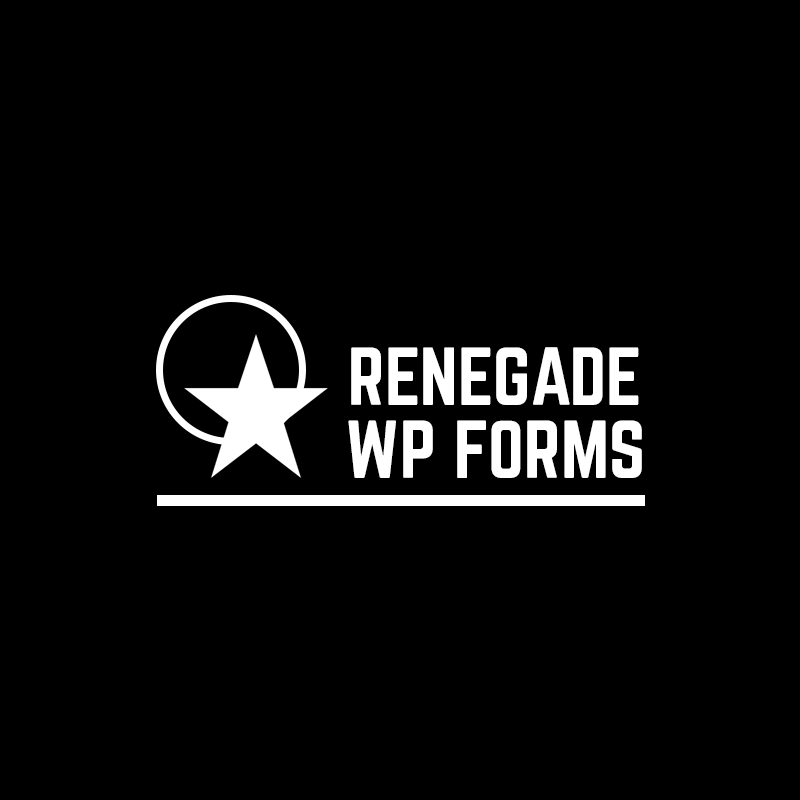
<style>
.page{position:relative;width:800px;height:800px;background:#000000}
.page>*{position:absolute;margin:0}
.t1{font:72px "Norwester-Regular";color:#ffffff}
</style>
<div class="page">
<p class="t1" style="left:351px;top:347px;width:288px;height:58px">RENEGADE</p>
<p class="t1" style="left:348px;top:420px;width:294px;height:58px">WP FORMS</p>
</div>
